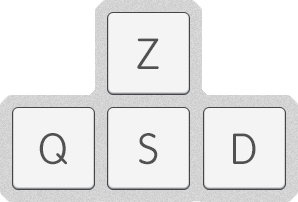
<style>
.page{position:relative;width:298px;height:202px;background:#f4f4f4}
.page>*{position:absolute;margin:0}
.t1{font:10.3px "VAGRoundedLT-Thin";letter-spacing:-0.02em;color:#515151}
.t2{font:10.3px "VAGRoundedLT-Thin";letter-spacing:-0.02em;color:#505050}
</style>
<div class="page">
<p class="t1" style="left:137px;top:38px;width:22px;height:31px">Z</p>
<p class="t1" style="left:39px;top:133px;width:28px;height:32px">Q</p>
<p class="t1" style="left:139px;top:133px;width:19px;height:32px">S</p>
<p class="t2" style="left:233px;top:133px;width:23px;height:31px">D</p>
</div>
